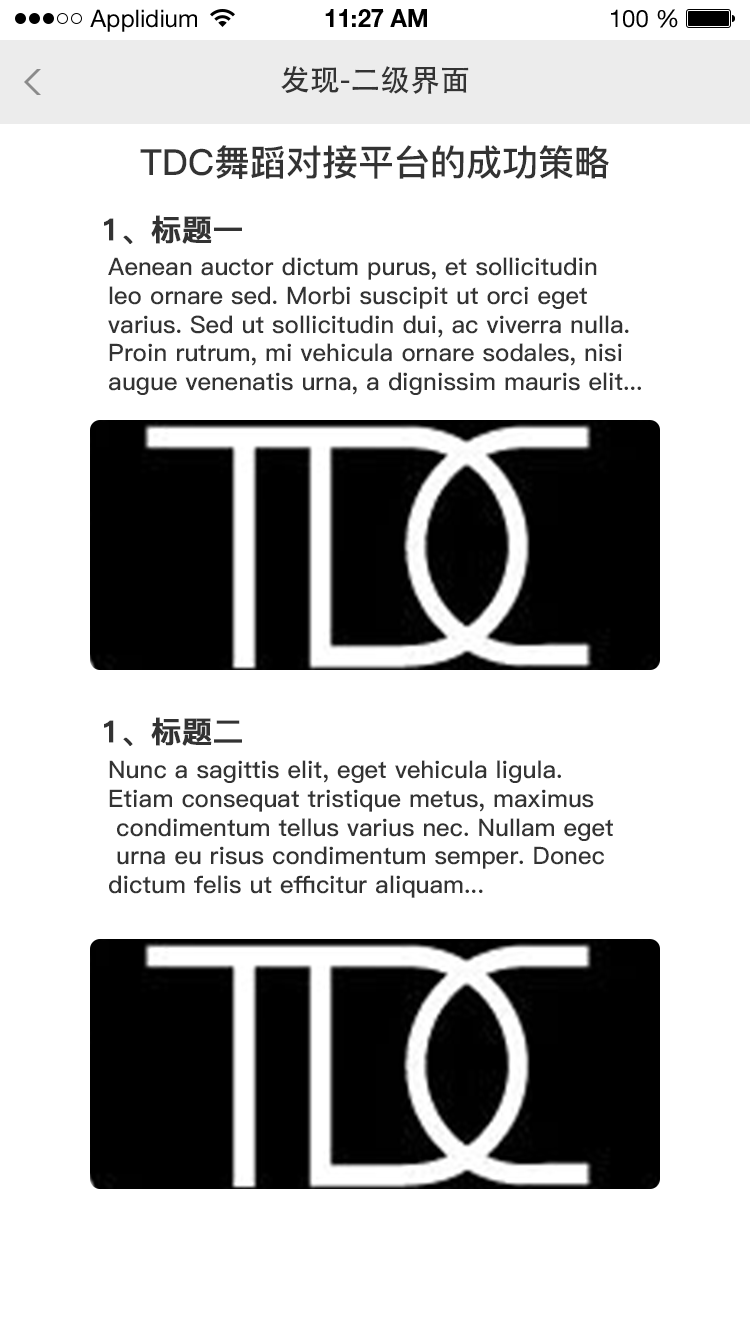
<style>
.page{position:relative;width:750px;height:1334px;background:#ffffff}
.page>*{position:absolute;margin:0}
.t1{font:24px "HelveticaNeueLTStd-Roman";color:#000000}
.t2{font:24px "HelveticaNeueLTStd-Bd";color:#000000}
.t3{font:30px "AdobeHeitiStd-Regular";color:#333333}
.t4{font:36px "PingFang-SC-Bold";color:#333333}
.t5{font:30px "PingFang-SC-Bold";color:#333333;font-weight:bold}
.t6{font:24px "PingFang-SC-Bold";color:#333333}
</style>
<div class="page">
<p class="t1" style="left:90px;top:9px;width:107px;height:23px">Applidium</p>
<p class="t2" style="left:325px;top:9px;width:102px;height:18px">11:27 AM</p>
<p class="t1" style="left:611px;top:9px;width:67px;height:19px">100 %</p>
<p class="t3" style="left:281px;top:66px;width:188px;height:28px">发现-二级界面</p>
<p class="t4" style="left:140px;top:145px;width:469px;height:34px">TDC舞蹈对接平台的成功策略</p>
<p class="t5" style="left:104px;top:215px;width:138px;height:29px">1、标题一</p>
<p class="t6" style="left:108px;top:257px;width:533px;height:138px">Aenean auctor dictum purus, et sollicitudin<br>leo ornare sed. Morbi suscipit ut orci eget<br>varius. Sed ut sollicitudin dui, ac viverra nulla. <br>Proin rutrum, mi vehicula ornare sodales, nisi<br>augue venenatis urna, a dignissim mauris elit...</p>
<p class="t5" style="left:104px;top:717px;width:138px;height:29px">1、标题二</p>
<p class="t6" style="left:109px;top:760px;width:504px;height:138px">Nunc a sagittis elit, eget vehicula ligula. <br>Etiam consequat tristique metus, maximus<br> condimentum tellus varius nec. Nullam eget<br> urna eu risus condimentum semper. Donec <br>dictum felis ut efficitur aliquam...</p>
</div>
